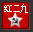
<style>
.page{position:relative;width:33px;height:32px;background:#c50000}
.page>*{position:absolute;margin:0}
.t1{font:10.4px "SimSun";letter-spacing:-0.25em;color:#ffffff}
</style>
<div class="page">
<p class="t1" style="left:4px;top:4px;width:24px;height:9px">红二九</p>
</div>
